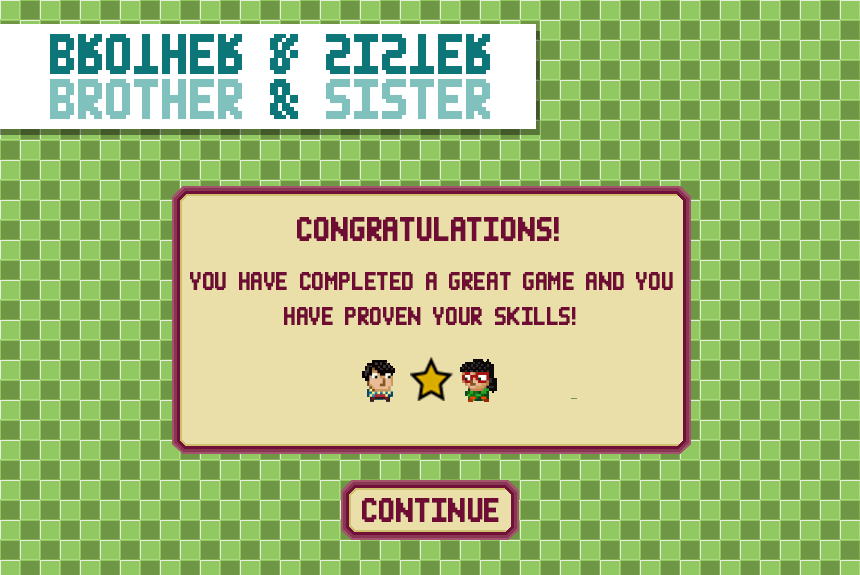
<style>
.page{position:relative;width:860px;height:575px;background:#92c861}
.page>*{position:absolute;margin:0}
.t1{font:80px "MiniPixel-7";color:#0d7678}
.t2{font:80px "MiniPixel-7";color:#81c1bd}
.t3{font:48px "MiniPixel-7";color:#6e0c33}
.t4{font:36px "MiniPixel-7";color:#6e0c33}
</style>
<div class="page">
<p class="t1" style="left:50px;top:34px;width:440px;height:40px">BROTHER &amp; SISTER</p>
<p class="t2" style="left:50px;top:79px;width:440px;height:40px">BROTHER <span class="t1">&amp;</span> SISTER</p>
<p class="t3" style="left:297px;top:217px;width:262px;height:24px">CONGRATULATIONS!</p>
<p class="t4" style="left:190px;top:272px;width:483px;height:18px">YOU HAVE COMPLETED A GREAT GAME AND YOU</p>
<p class="t4" style="left:284px;top:307px;width:292px;height:18px">HAVE PROVEN YOUR SKILLS!</p>
<p class="t3" style="left:362px;top:498px;width:137px;height:24px">CONTINUE</p>
</div>
